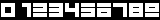
<style>
.page{position:relative;width:160px;height:20px;background:#000000}
.page>*{position:absolute;margin:0}
.t1{font:30px "BINBold-Regular";color:#ffffff;text-transform:uppercase}
</style>
<div class="page">
<p class="t1" style="left:1px;top:3px;width:14px;height:14px">0</p>
<p class="t1" style="left:22px;top:3px;width:9px;height:14px">1</p>
<p class="t1" style="left:33px;top:3px;width:14px;height:14px">2</p>
<p class="t1" style="left:49px;top:3px;width:14px;height:14px">3</p>
<p class="t1" style="left:65px;top:3px;width:14px;height:14px">4</p>
<p class="t1" style="left:81px;top:3px;width:14px;height:14px">5</p>
<p class="t1" style="left:97px;top:3px;width:14px;height:14px">6</p>
<p class="t1" style="left:113px;top:3px;width:14px;height:14px">7</p>
<p class="t1" style="left:129px;top:3px;width:14px;height:14px">8</p>
<p class="t1" style="left:145px;top:3px;width:14px;height:14px">9</p>
</div>
